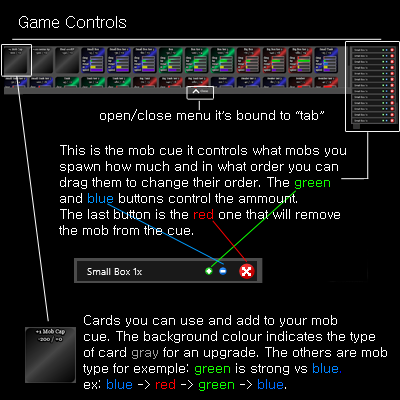
<style>
.page{position:relative;width:400px;height:400px;background:#000000}
.page>*{position:absolute;margin:0}
.t1{font:16px "Gulim";color:#ffffff}
.t2{font:13.3px "Gulim";color:#ffffff}
.t3{font:13.3px "Gulim";color:#12ff00}
.t4{font:13.3px "Gulim";color:#0096ff}
.t5{font:13.3px "Gulim";color:#ff0000}
.t6{font:13.3px "Gulim";color:#a1a1a1}
.t7{font:13.3px "Gulim";color:#18ff00}
.t8{font:13.3px "Gulim";color:#0084ff}
.t9{font:13.3px "Gulim";color:#000cff}
.t10{font:13.3px "Gulim";color:#0078ff}
.t11{font:13.3px "Gulim";color:#0cff00}
.t12{font:13.3px "Gulim";color:#006cff}
</style>
<div class="page">
<p class="t1" style="left:19px;top:16px;width:107px;height:12px">Game Controls</p>
<p class="t2" style="left:100px;top:109px;width:224px;height:13px">open/close menu it’s bound to “tab”</p>
<p class="t2" style="left:59px;top:145px;width:287px;height:90px">This is the mob cue it controls what mobs you<br>spawn how much and in what order you can<br>drag them to change their order. The <span class="t3">green</span> <br>and <span class="t4">blue</span> buttons control the ammount.<br>The last button is the <span class="t5">red</span> one that will remove<br>the mob from the cue.</p>
<p class="t2" style="left:83px;top:315px;width:304px;height:76px">Cards you can use and add to your mob <br>cue. The background colour indicates the type<br>of card <span class="t6">gray</span> for an upgrade. The others are mob<br>type for exemple: <span class="t7">green</span> is strong vs <span class="t8">blue</span><span class="t9">.<br></span>ex: <span class="t10">blue </span>-&gt; <span class="t5">red</span> -&gt; <span class="t11">green</span> -&gt; <span class="t12">blue</span>.</p>
</div>
